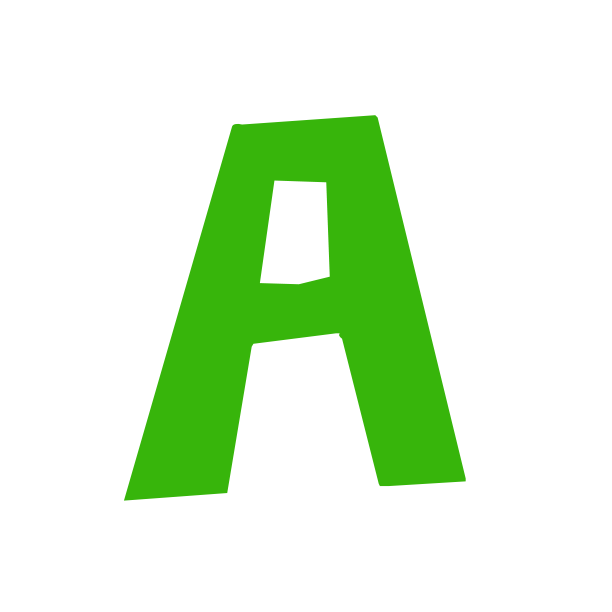
<style>
.page{position:relative;width:612px;height:612px;background:#ffffff}
.page>*{position:absolute;margin:0}
.t1{font:583px "DKSnippitySnap";letter-spacing:0.04em;color:#37b50b}
</style>
<div class="page">
<p class="t1" style="left:123px;top:115px;width:343px;height:386px">A</p>
</div>
